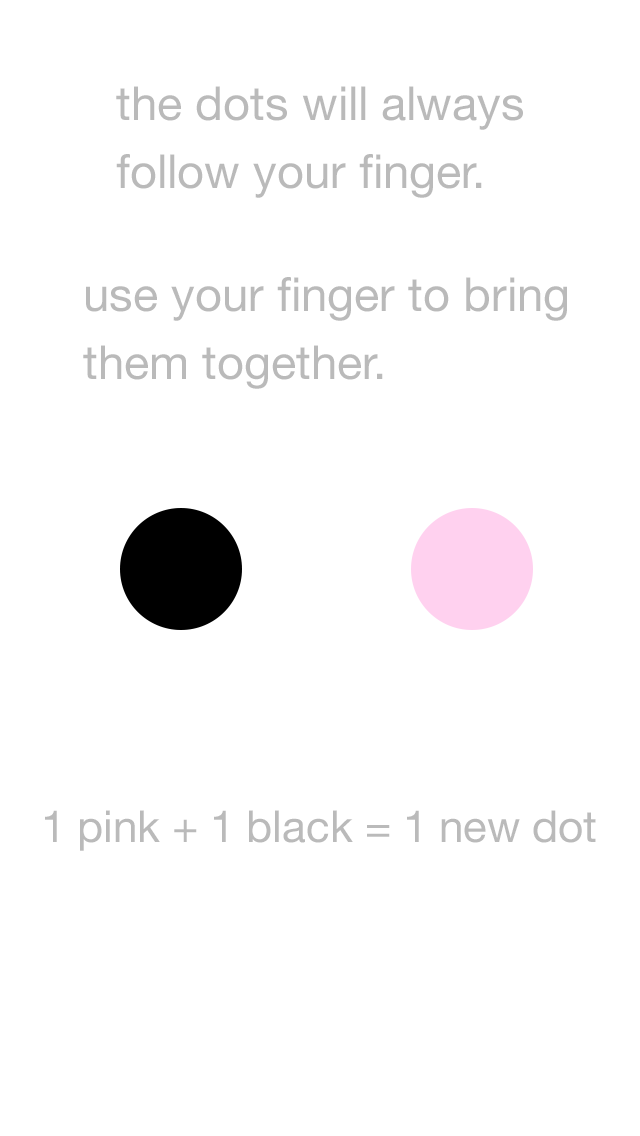
<style>
.page{position:relative;width:640px;height:1136px;background:#ffffff}
.page>*{position:absolute;margin:0}
.t1{font:47px/68px "HelveticaNeue";color:#bababa}
.t2{font:44px "HelveticaNeue";color:#bababa}
</style>
<div class="page">
<p class="t1" style="left:116px;top:86px;width:407px;height:112px">the dots will always<br>follow your finger.</p>
<p class="t1" style="left:83px;top:277px;width:484px;height:112px">use your finger to bring<br>them together.</p>
<p class="t2" style="left:45px;top:810px;width:551px;height:41px">1 pink + 1 black = 1 new dot</p>
</div>
